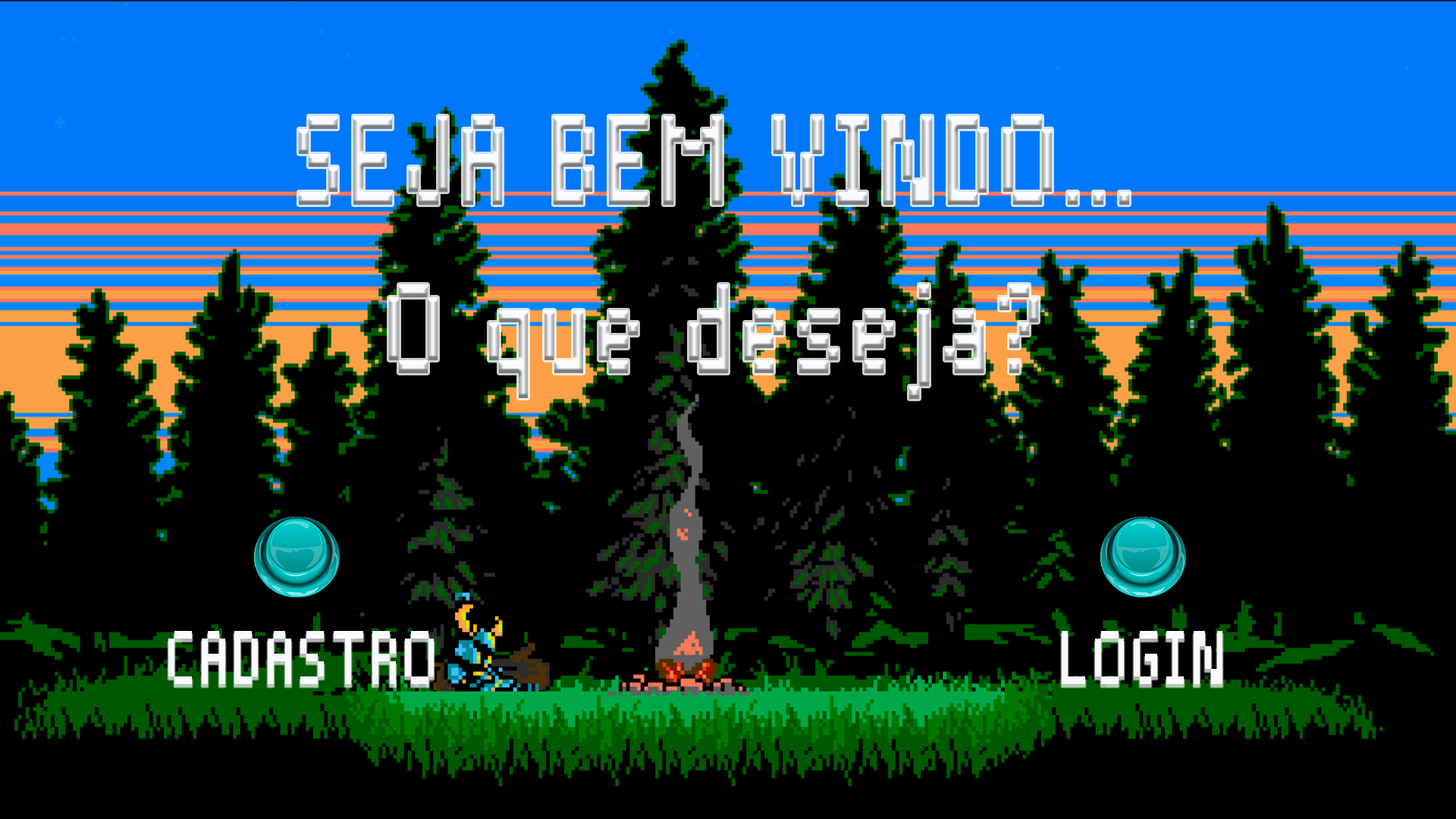
<style>
.page{position:relative;width:1456px;height:819px;background:#000000}
.page>*{position:absolute;margin:0}
.t1{font:164.3px/21.1px "Pixelade";letter-spacing:0.05em;scale:0.77 1}
.t2{font:98.6px "Pixelade";letter-spacing:0.05em;color:#f8fafd;scale:0.77 1}
</style>
<div class="page">
<p class="t1" style="left:299px;top:116px;width:830px;height:283px;text-align:center">SEJA BEM VINDO...<br><br><br><br><br><br><br><br>O que deseja?</p>
<p class="t2" style="left:168px;top:631px;width:266px;height:53px">CADASTRO</p>
<p class="t2" style="left:1062px;top:631px;width:160px;height:53px">LOGIN</p>
</div>
